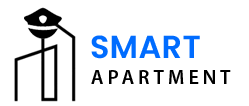
<style>
.page{position:relative;width:249px;height:106px;background:#ffffff}
.page>*{position:absolute;margin:0}
.t1{font:31.9px "Poppins-SemiBold";letter-spacing:0.01em;color:#006cff}
.t2{font:20.2px "MyriadPro-Semibold";letter-spacing:0.2em;color:#000000}
</style>
<div class="page">
<p class="t1" style="left:91px;top:35px;width:109px;height:24px">SMART</p>
<p class="t2" style="left:91px;top:70px;width:140px;height:14px">APARTMENT</p>
</div>
